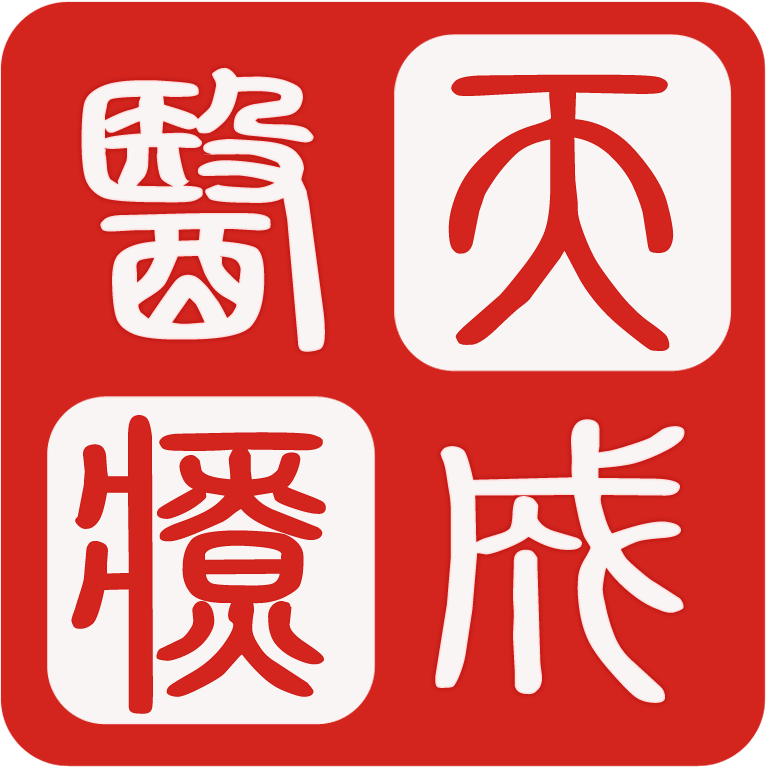
<style>
.page{position:relative;width:766px;height:767px;background:#d3241e}
.page>*{position:absolute;margin:0}
.t1{font:319.4px/351.4px "HYj3gf";letter-spacing:-0.1em;color:#d3241e;text-transform:uppercase;scale:1.41 1}
.t2{font:319.4px/351.4px "HYj3gf";letter-spacing:-0.14em;color:#faf5f5;text-transform:uppercase;scale:1.55 1}
</style>
<div class="page">
<p class="t1" style="left:71px;top:74px;width:603px;height:640px">天<br>疗</p>
<p class="t2" style="left:81px;top:67px;width:604px;height:636px">医<br>  成</p>
</div>
